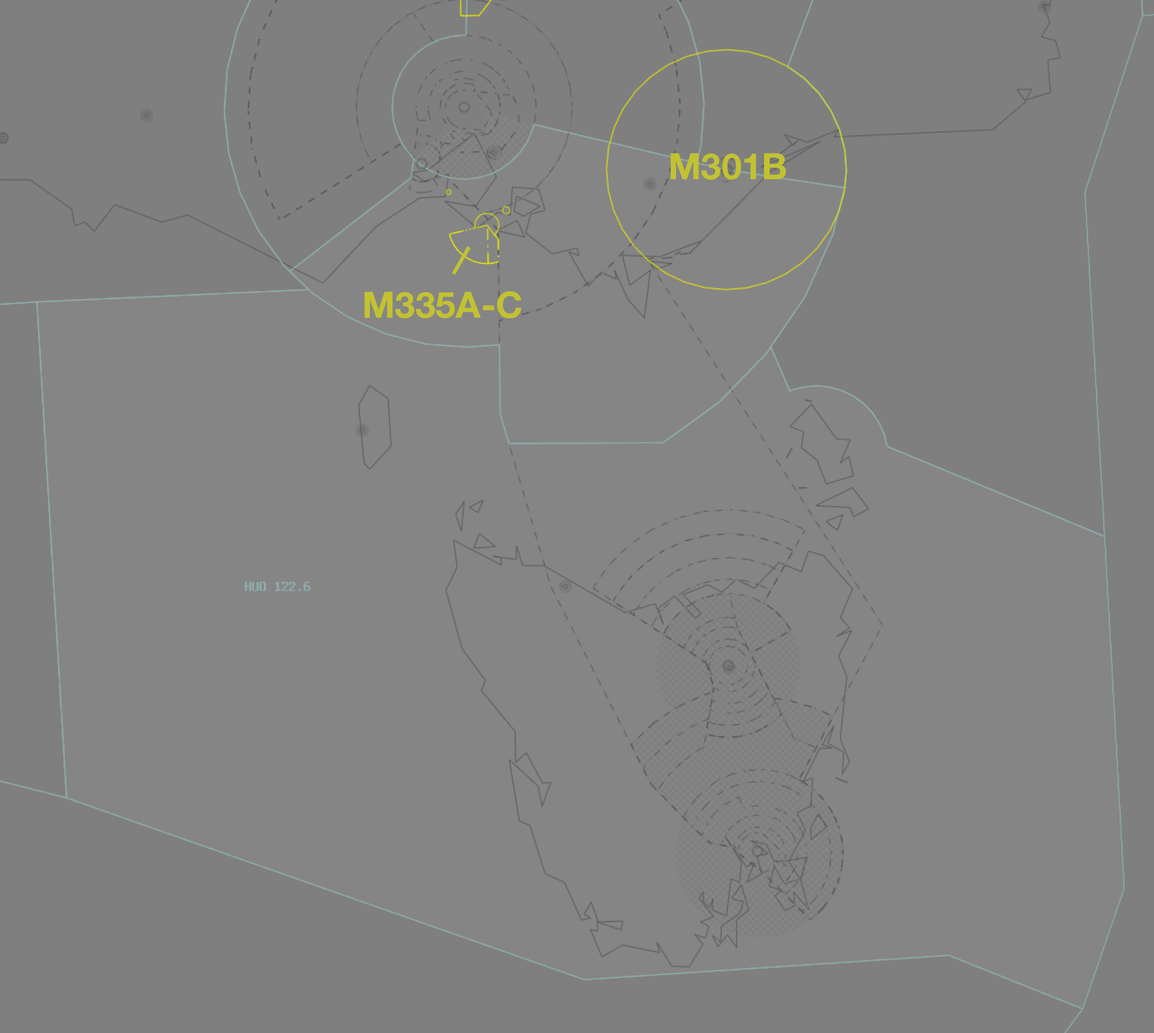
<style>
.page{position:relative;width:1154px;height:1033px;background:#858585}
.page>*{position:absolute;margin:0}
.t1{font:36.5px "HelveticaNeue-Bold";color:#c2c231}
</style>
<div class="page">
<p class="t1" style="left:671px;top:153px;width:115px;height:27px">M301B</p>
<p class="t1" style="left:365px;top:291px;width:157px;height:27px">M335A-C</p>
</div>
